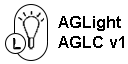
<style>
.page{position:relative;width:128px;height:64px;background:#ffffff}
.page>*{position:absolute;margin:0}
.t1{font:16.7px "Arial-BoldMT";color:#000000}
</style>
<div class="page">
<p class="t1" style="left:58px;top:16px;width:66px;height:32px">AGLight<br>AGLC v1</p>
</div>
